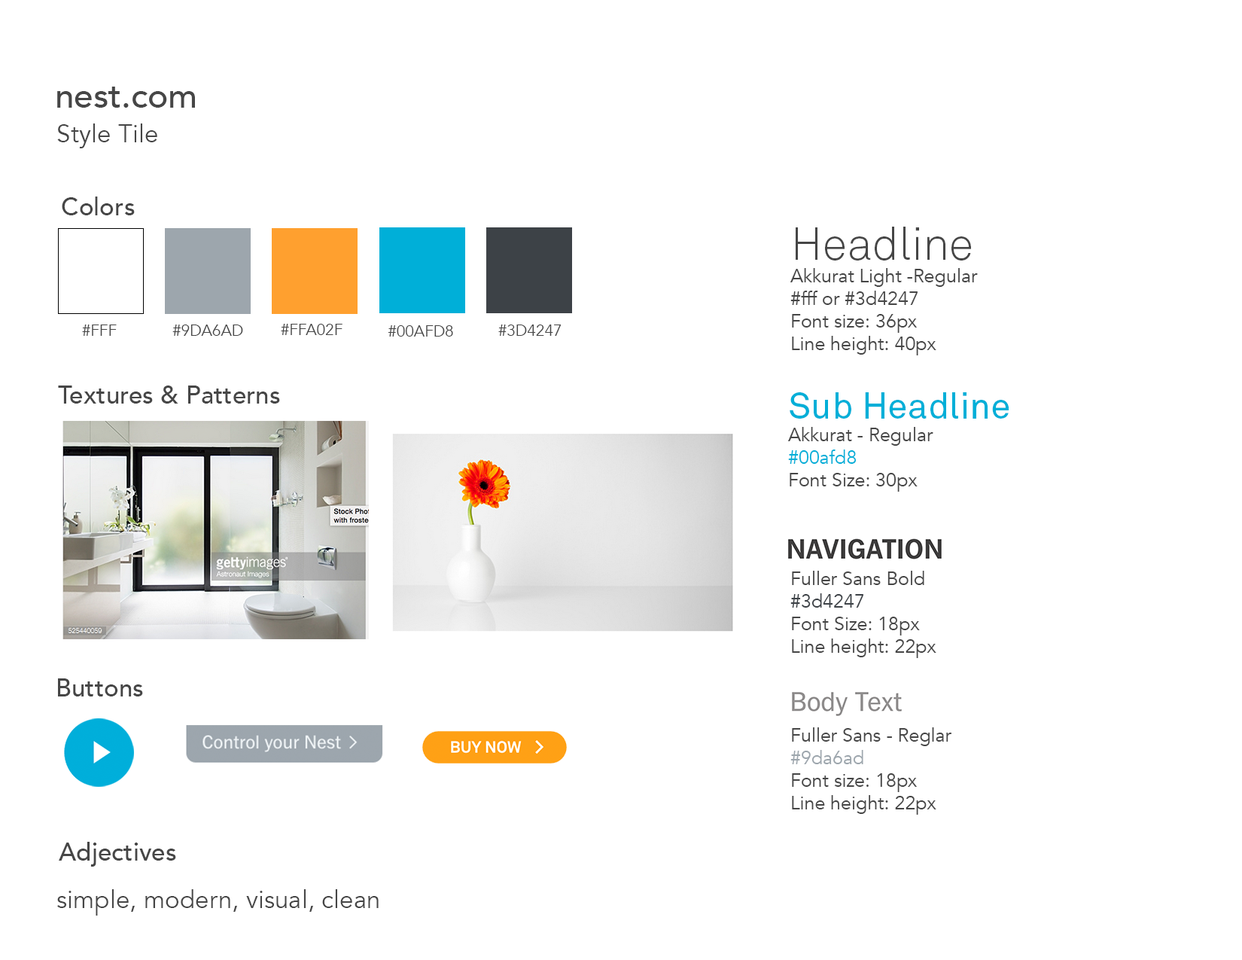
<style>
.page{position:relative;width:1242px;height:960px;background:#ffffff}
.page>*{position:absolute;margin:0}
.t1{font:34.5px "Avenir-Medium";color:#464646}
.t2{font:25.1px "Avenir-Book";color:#464646}
.t3{font:25.1px "Avenir-Medium";color:#464646}
.t4{font:18.8px "Avenir-Book";color:#464646}
.t5{font:45.2px "AkkuratLight";color:#464646}
.t6{font:15.7px "Avenir-Book";color:#464646}
.t7{font:36.1px "Akkurat";color:#00afd8}
.t8{font:18.8px "Avenir-Book";color:#00afd8}
.t9{font:18.8px "Avenir-Book";color:#3d4247}
.t10{font:18.8px "Avenir-Book";color:#9da6ad}
</style>
<div class="page">
<p class="t1" style="left:57px;top:87px;width:138px;height:21px">nest.com</p>
<p class="t2" style="left:57px;top:123px;width:100px;height:25px">Style Tile</p>
<p class="t3" style="left:62px;top:196px;width:73px;height:19px">Colors</p>
<p class="t4" style="left:791px;top:227px;width:187px;height:128px"><span class="t5">Headline<br></span>Akkurat Light -Regular<br>#fff or #3d4247<br>Font size: 36px<br>Line height: 40px</p>
<p class="t6" style="left:82px;top:324px;width:35px;height:12px">#FFF</p>
<p class="t6" style="left:172px;top:324px;width:71px;height:12px">#9DA6AD</p>
<p class="t6" style="left:281px;top:324px;width:62px;height:11px">#FFA02F</p>
<p class="t6" style="left:388px;top:325px;width:65px;height:12px">#00AFD8</p>
<p class="t6" style="left:498px;top:324px;width:64px;height:12px">#3D4247</p>
<p class="t3" style="left:58px;top:385px;width:222px;height:19px">Textures &amp; Patterns</p>
<p class="t4" style="left:788px;top:392px;width:221px;height:100px"><span class="t7">Sub Headline<br></span>Akkurat - Regular<br><span class="t8">#00afd8<br></span>Font Size: 30px<br>Line height: 33px</p>
<p class="t4" style="left:791px;top:571px;width:146px;height:87px">Fuller Sans Bold<br><span class="t9">#3d4247<br></span>Font Size: 18px<br>Line height: 22px</p>
<p class="t3" style="left:58px;top:678px;width:85px;height:18px">Buttons</p>
<p class="t4" style="left:791px;top:727px;width:161px;height:88px">Fuller Sans - Reglar<br><span class="t10">#9da6ad<br></span>Font size: 18px<br>Line height: 22px</p>
<p class="t3" style="left:59px;top:842px;width:117px;height:25px">Adjectives</p>
<p class="t2" style="left:57px;top:889px;width:322px;height:26px">simple, modern, visual, clean</p>
</div>
